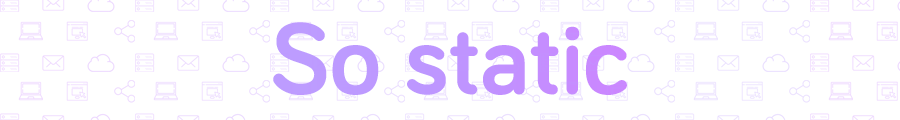
<style>
.page{position:relative;width:900px;height:120px;background:#ffffff}
.page>*{position:absolute;margin:0}
.t1{font:103.7px "Bariol-Bold";color:#bf94ff}
</style>
<div class="page">
<p class="t1" style="left:273px;top:22px;width:354px;height:73px">So static</p>
</div>
